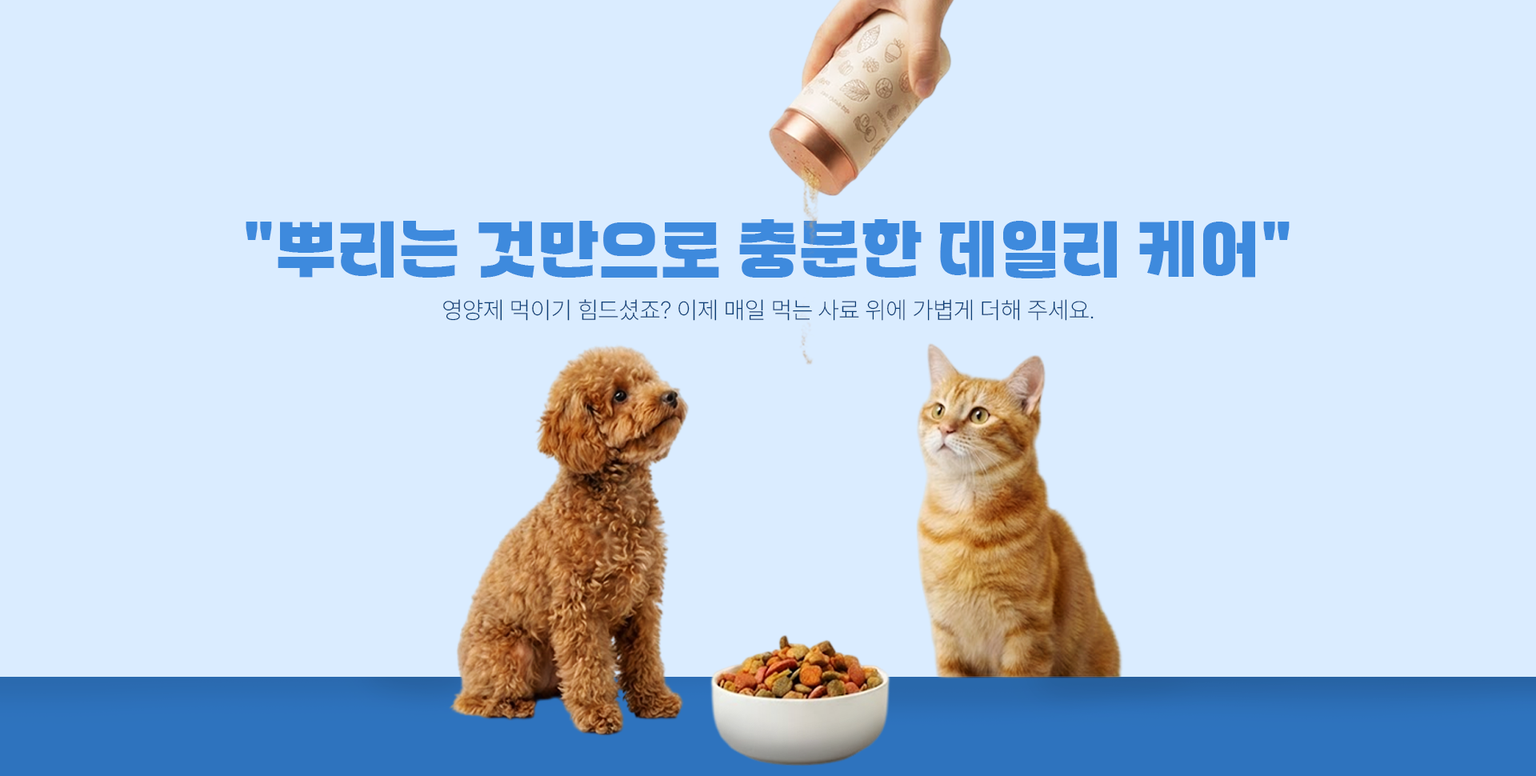
<style>
.page{position:relative;width:1536px;height:776px;background:#daecff}
.page>*{position:absolute;margin:0}
.t1{font:65.7px "WAGURI-TTF";color:#3e8add;text-transform:uppercase}
.t2{font:24px "Pretendard-ExtraLight";color:#093e77;text-transform:uppercase}
</style>
<div class="page">
<p class="t1" style="left:246px;top:219px;width:1044px;height:59px">"뿌리는 것만으로 충분한 데일리 케어"</p>
<p class="t2" style="left:443px;top:299px;width:651px;height:22px">영양제 먹이기 힘드셨죠? 이제 매일 먹는 사료 위에 가볍게 더해 주세요.</p>
</div>
